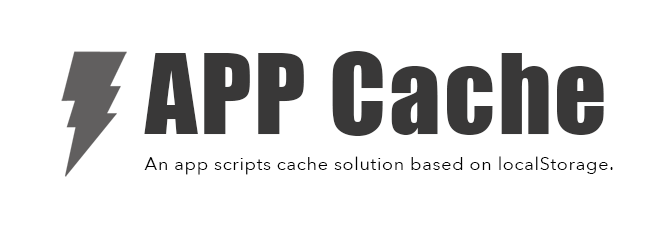
<style>
.page{position:relative;width:672px;height:228px;background:#ffffff}
.page>*{position:absolute;margin:0}
.t1{font:103.3px "Impact";letter-spacing:0.025em;color:#393838}
.t2{font:18.5px "AvenirNext-Regular";letter-spacing:0.025em;color:#000000}
</style>
<div class="page">
<p class="t1" style="left:144px;top:51px;width:460px;height:85px">APP Cache</p>
<p class="t2" style="left:144px;top:156px;width:469px;height:19px">An app scripts cache solution based on localStorage.</p>
</div>
